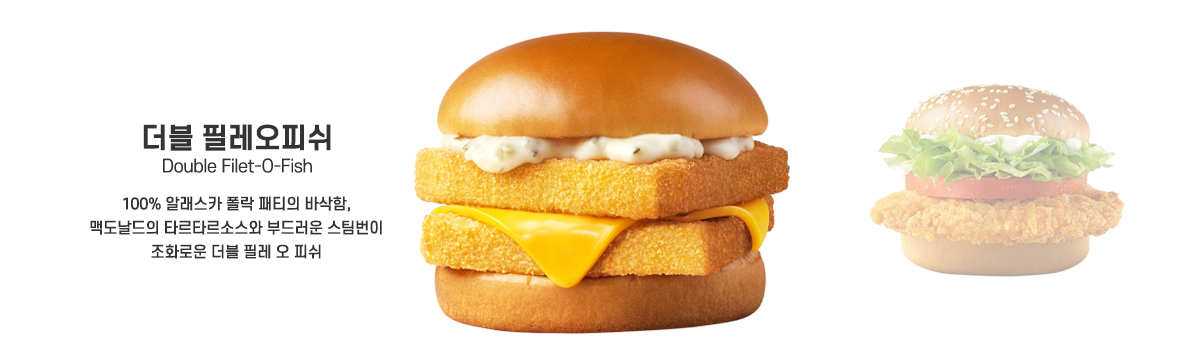
<style>
.page{position:relative;width:1200px;height:360px;background:#ffffff}
.page>*{position:absolute;margin:0}
.t1{font:17.5px/24px "S-CoreDream-4Regular";letter-spacing:-0.02em;color:#333333}
.t2{font:28px/24px "S-CoreDream-6Bold";letter-spacing:-0.02em;color:#333333}
.t3{font:15px/24px "S-CoreDream-5Medium";letter-spacing:-0.02em;color:#333333}
</style>
<div class="page">
<p class="t1" style="left:143px;top:124px;width:188px;height:49px;text-align:center"><span class="t2">더블 필레오피쉬<br></span>Double Filet-O-Fish</p>
<p class="t3" style="left:90px;top:196px;width:292px;height:63px;text-align:center">100% 알래스카 폴락 패티의 바삭함,<br>맥도날드의 타르타르소스와 부드러운 스팀번이<br>조화로운 더블 필레 오 피쉬</p>
</div>
